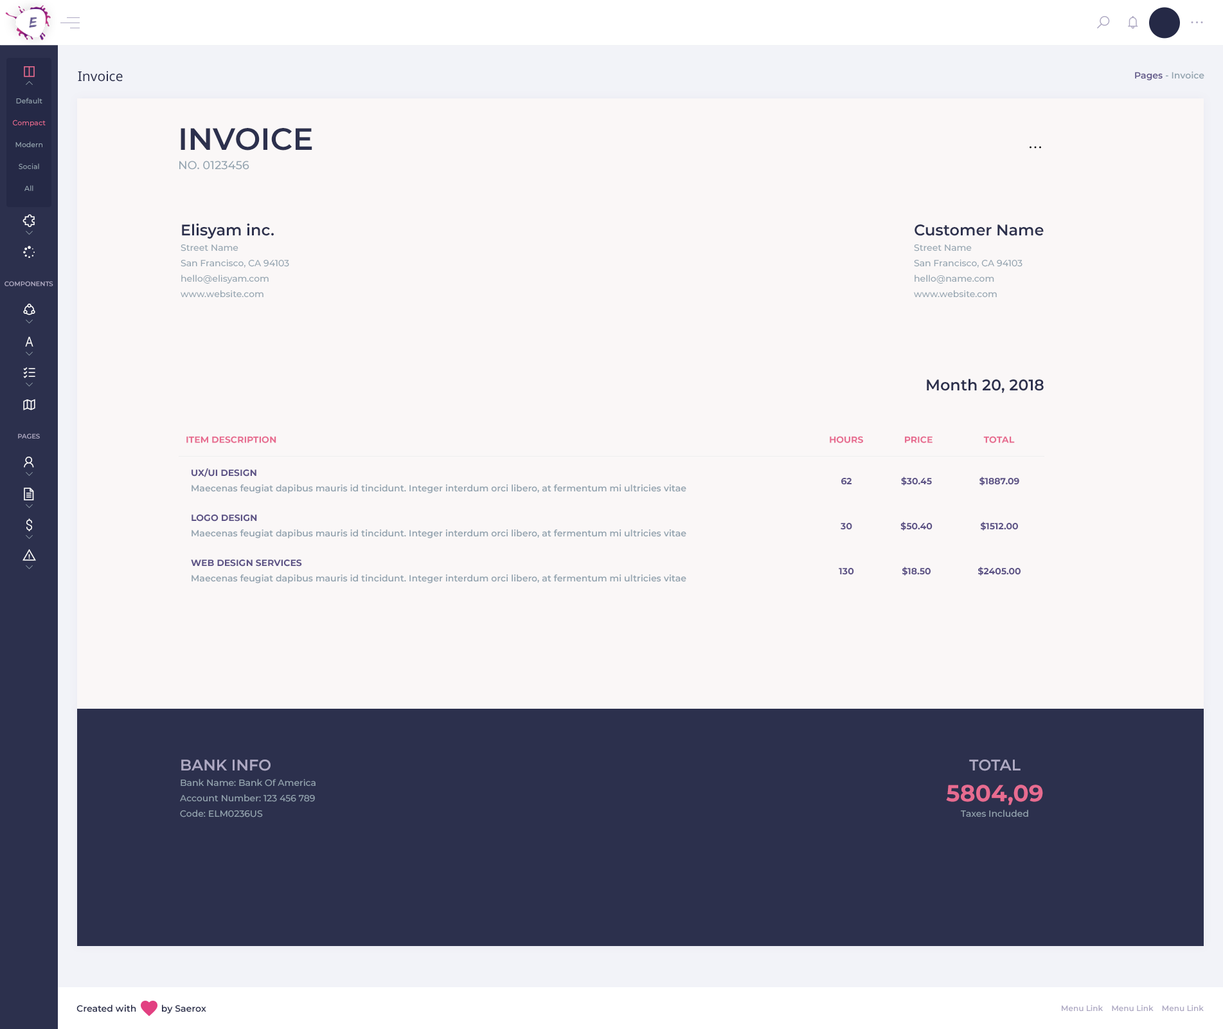
<style>
.page{position:relative;width:1223px;height:1029px;background:#faf7f7}
.page>*{position:absolute;margin:0}
.t1{font:13.5px "NotoSans-Regular";color:#2c304d}
.t2{font:9px "Montserrat-SemiBold";color:#94a4b0}
.t3{font:9px "Montserrat-SemiBold";color:#5d5386}
.t4{font:7.1px/21.9px "Montserrat-Medium";color:#98a8b4}
.t5{font:7.1px/21.9px "Montserrat-Medium";color:#e76c90}
.t6{font:11.6px/19.3px "Montserrat-Medium";color:#94a4b0;text-transform:uppercase}
.t7{font:30.9px/19.3px "Montserrat-SemiBold";color:#2c304d;text-transform:uppercase}
.t8{font:9px/15.4px "Montserrat-Medium";color:#94a4b0}
.t9{font:15.4px/19.3px "Montserrat-SemiBold";color:#2c304d}
.t10{font:6.4px "Montserrat-SemiBold";color:#aea9c3;text-transform:uppercase}
.t11{font:15.4px "Montserrat-SemiBold";color:#2c304d}
.t12{font:9px "Montserrat-Bold";color:#e76c90;text-transform:uppercase}
.t13{font:9px/15.4px "Montserrat-SemiBold";color:#94a4b0}
.t14{font:9px/15.4px "Montserrat-Bold";color:#5d5386;text-transform:uppercase}
.t15{font:9px "Montserrat-Bold";color:#5d5386;text-transform:uppercase}
.t16{font:15.4px/19.3px "Montserrat-SemiBold";color:#aea9c3;text-transform:uppercase}
.t17{font:15.4px/30.9px "Montserrat-SemiBold";color:#aea9c3;text-transform:uppercase}
.t18{font:23.1px/30.9px "Montserrat-Bold";color:#e76c90}
.t19{font:9px "Montserrat-SemiBold";color:#2c304d}
.t20{font:7.7px "Montserrat-SemiBold";color:#aea9c3}
</style>
<div class="page">
<p class="t1" style="left:78px;top:71px;width:45px;height:11px">Invoice</p>
<p class="t2" style="left:1135px;top:71px;width:70px;height:9px"><span class="t3">Pages</span> - Invoice</p>
<p class="t4" style="left:13px;top:98px;width:33px;height:93px;text-align:center">Default<br><span class="t5">Compact<br></span>Modern<br>Social<br>All</p>
<p class="t6" style="left:179px;top:128px;width:133px;height:42px"><span class="t7">Invoice<br></span>no. 0123456</p>
<p class="t8" style="left:181px;top:223px;width:108px;height:74px"><span class="t9">Elisyam inc.<br></span>Street Name<br>San Francisco, CA 94103<br>hello@elisyam.com  <br>www.website.com</p>
<p class="t8" style="left:914px;top:224px;width:130px;height:73px"><span class="t9">Customer Name<br></span>Street Name<br>San Francisco, CA 94103<br>hello@name.com  <br>www.website.com</p>
<p class="t10" style="left:4px;top:281px;width:49px;height:5px">Components</p>
<p class="t11" style="left:927px;top:379px;width:117px;height:14px">Month 20, 2018</p>
<p class="t10" style="left:18px;top:433px;width:22px;height:5px">Pages</p>
<p class="t12" style="left:186px;top:436px;width:829px;height:7px">item description                                                                                                                                                                                                                         hours                price                    total</p>
<p class="t13" style="left:192px;top:468px;width:495px;height:25px"><span class="t14">Ux/UI Design<br></span>Maecenas feugiat dapibus mauris id tincidunt. Integer interdum orci libero, at fermentum mi ultricies vitae</p>
<p class="t15" style="left:842px;top:478px;width:10px;height:7px">62</p>
<p class="t15" style="left:901px;top:476px;width:31px;height:9px">$30.45</p>
<p class="t15" style="left:980px;top:476px;width:40px;height:9px">$1887.09</p>
<p class="t13" style="left:192px;top:514px;width:495px;height:24px"><span class="t14">Logo Design<br></span>Maecenas feugiat dapibus mauris id tincidunt. Integer interdum orci libero, at fermentum mi ultricies vitae</p>
<p class="t15" style="left:901px;top:521px;width:32px;height:9px">$50.40</p>
<p class="t15" style="left:980px;top:521px;width:38px;height:9px">$1512.00</p>
<p class="t15" style="left:841px;top:523px;width:11px;height:7px">30</p>
<p class="t13" style="left:191px;top:559px;width:496px;height:24px"><span class="t14">Web design services<br></span>Maecenas feugiat dapibus mauris id tincidunt. Integer interdum orci libero, at fermentum mi ultricies vitae</p>
<p class="t15" style="left:839px;top:568px;width:15px;height:7px">130</p>
<p class="t15" style="left:902px;top:566px;width:29px;height:9px">$18.50</p>
<p class="t15" style="left:978px;top:566px;width:43px;height:9px">$2405.00</p>
<p class="t8" style="left:180px;top:759px;width:136px;height:58px"><span class="t16">Bank Info<br></span>Bank Name: Bank Of America<br>Account Number: 123 456 789<br>Code: ELM0236US</p>
<p class="t8" style="left:946px;top:759px;width:97px;height:57px;text-align:center"><span class="t17">Total<br></span><span class="t18">5804,09<br></span>Taxes Included</p>
<p class="t19" style="left:76px;top:1004px;width:130px;height:9px">Created with          by Saerox</p>
<p class="t20" style="left:1062px;top:1004px;width:142px;height:7px">Menu Link    Menu Link    Menu Link</p>
</div>
